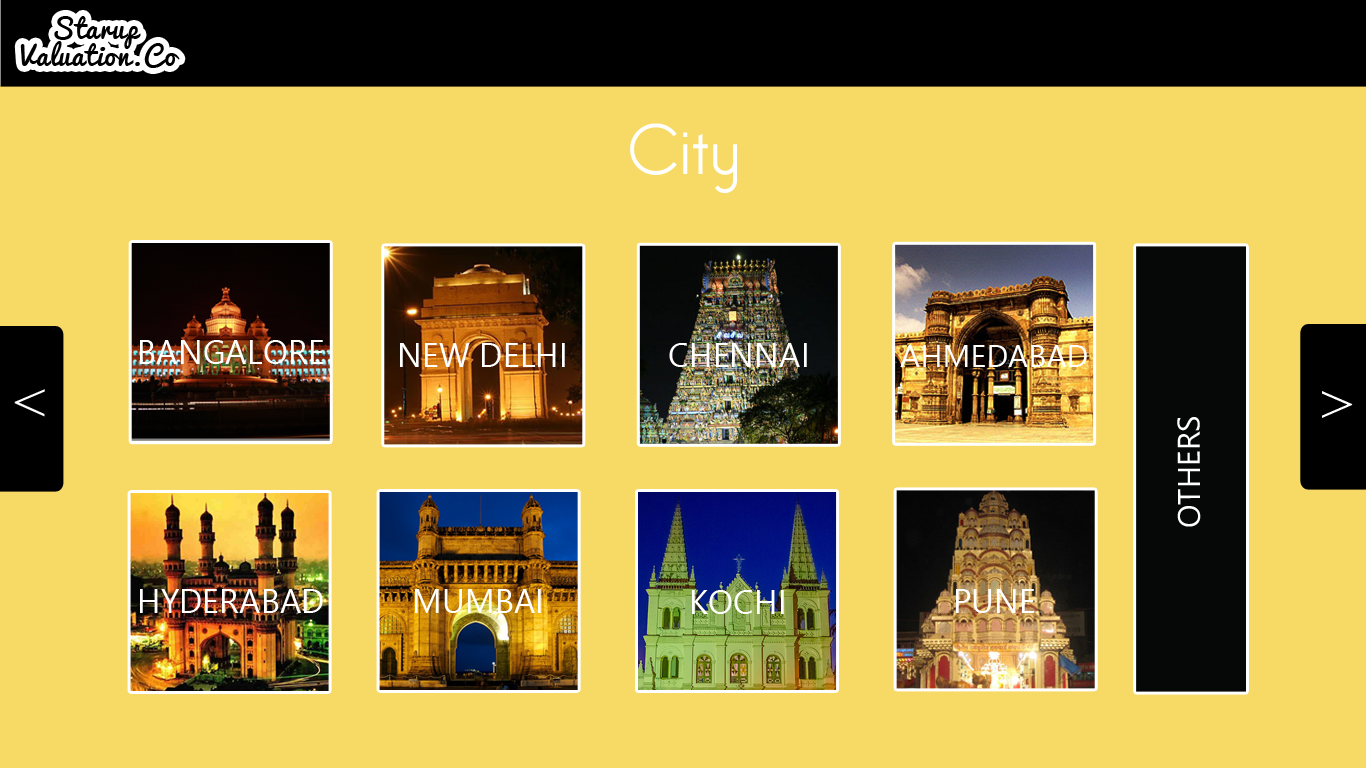
<style>
.page{position:relative;width:1366px;height:768px;background:#f7da66}
.page>*{position:absolute;margin:0}
.t1{font:26.6px/26.6px "Pacifico";letter-spacing:0.04em;color:#000000}
.t2{font:69.2px "BelleroseLight";letter-spacing:0.04em;color:#ffffff}
.t3{font:33.3px "SegoeUI";color:#ffffff;text-transform:uppercase}
.t4{font:31.2px "SegoeUI";color:#ffffff;text-transform:uppercase}
.t5{font:56.7px "TimesNewRomanPSMT";letter-spacing:0.04em;color:#ffffff}
</style>
<div class="page">
<p class="t1" style="left:20px;top:16px;width:160px;height:52px;text-align:center">Starup <br>Valuation.Co</p>
<p class="t2" style="left:630px;top:123px;width:107px;height:70px">City</p>
<p class="t3" style="left:140px;top:340px;width:184px;height:24px">BangAlore</p>
<p class="t3" style="left:400px;top:343px;width:165px;height:24px">new delhi</p>
<p class="t3" style="left:669px;top:343px;width:138px;height:24px">chennai</p>
<p class="t4" style="left:900px;top:345px;width:187px;height:22px">ahmedabaD</p>
<p class="t5" style="left:14px;top:389px;width:31px;height:28px;rotate:-180deg">&gt;</p>
<p class="t5" style="left:1322px;top:391px;width:31px;height:27px">&gt;</p>
<p class="t4" style="left:1177px;top:417px;width:24px;height:110px;rotate:-90deg">others</p>
<p class="t3" style="left:140px;top:589px;width:183px;height:24px">hyderabad</p>
<p class="t3" style="left:415px;top:589px;width:126px;height:24px">mumbai</p>
<p class="t3" style="left:692px;top:590px;width:92px;height:24px">Kochi</p>
<p class="t3" style="left:956px;top:589px;width:79px;height:24px">pune</p>
</div>
